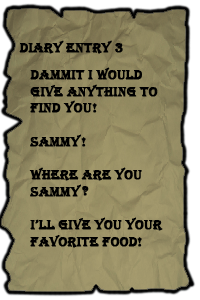
<style>
.page{position:relative;width:200px;height:300px}
.page>*{position:absolute;margin:0}
.t1{font:13.9px "Algerian";color:#000000;font-weight:bold}
</style>
<div class="page">
<p class="t1" style="left:19px;top:40px;width:104px;height:14px">Diary Entry 3</p>
<p class="t1" style="left:29px;top:67px;width:134px;height:181px;text-align:right">dammit i would give anything to find you<br><br>sammy<br><br>where are you sammy<br><br>i’ll give you your favorite food</p>
<p class="t1" style="left:92px;top:103px;width:5px;height:10px">!</p>
<p class="t1" style="left:81px;top:137px;width:5px;height:10px">!</p>
<p class="t1" style="left:82px;top:186px;width:7px;height:10px">?</p>
<p class="t1" style="left:137px;top:237px;width:5px;height:10px">!</p>
</div>
